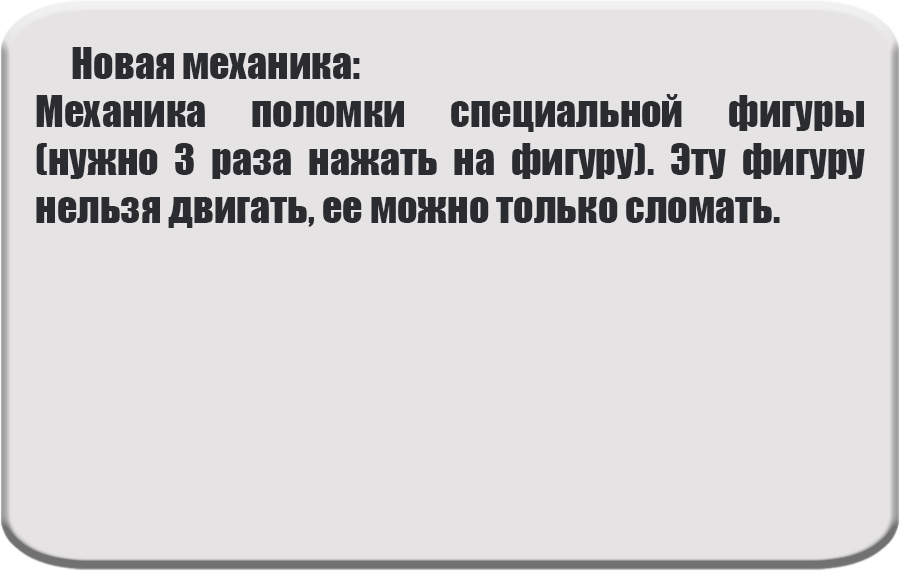
<style>
.page{position:relative;width:900px;height:570px;background:#e5e3e3}
.page>*{position:absolute;margin:0}
.t1{font:40px "Impact";color:#2a2c30}
</style>
<div class="page">
<p class="t1" style="left:36px;top:47px;width:829px;height:181px;text-align:justify">Новая механика:<br>Механика поломки специальной фигуры (нужно 3 раза нажать на фигуру). Эту фигуру нельзя двигать, ее можно только сломать.</p>
</div>
